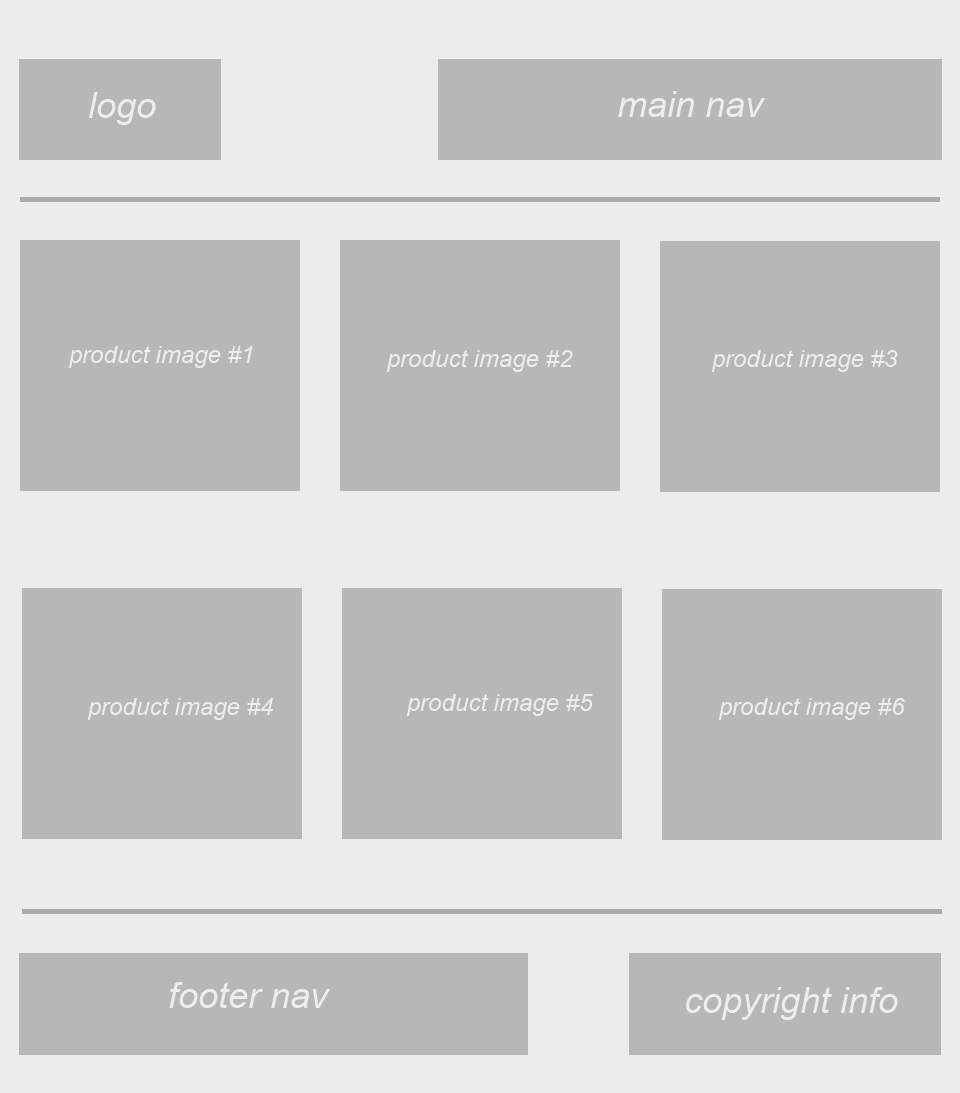
<style>
.page{position:relative;width:960px;height:1093px;background:#b7b7b7}
.page>*{position:absolute;margin:0}
.t1{font:36px "Arial-ItalicMT";color:#ededed}
.t2{font:24px "Arial-ItalicMT";color:#ededed}
</style>
<div class="page">
<p class="t1" style="left:89px;top:92px;width:67px;height:33px">logo</p>
<p class="t1" style="left:618px;top:91px;width:147px;height:26px">main nav</p>
<p class="t2" style="left:68px;top:346px;width:185px;height:22px">product image #1</p>
<p class="t2" style="left:386px;top:350px;width:187px;height:22px">product image #2</p>
<p class="t2" style="left:711px;top:350px;width:187px;height:22px">product image #3</p>
<p class="t2" style="left:87px;top:698px;width:186px;height:22px">product image #4</p>
<p class="t2" style="left:406px;top:694px;width:187px;height:22px">product image #5</p>
<p class="t2" style="left:718px;top:698px;width:187px;height:22px">product image #6</p>
<p class="t1" style="left:169px;top:982px;width:161px;height:26px">footer nav</p>
<p class="t1" style="left:686px;top:987px;width:212px;height:33px">copyright info</p>
</div>
